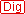
<style>
.page{position:relative;width:25px;height:14px;background:#ffffff}
.page>*{position:absolute;margin:0}
.t1{font:12px "ArialMT";color:#df0000}
</style>
<div class="page">
<p class="t1" style="left:3px;top:1px;width:19px;height:14px">Dig</p>
</div>
